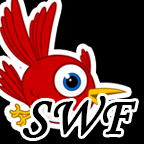
<style>
.page{position:relative;width:144px;height:144px;background:#000000}
.page>*{position:absolute;margin:0}
.t1{font:53.9px "STLiti";color:#000000;font-weight:bold}
</style>
<div class="page">
<p class="t1" style="left:23px;top:96px;width:113px;height:42px">SWF</p>
</div>
